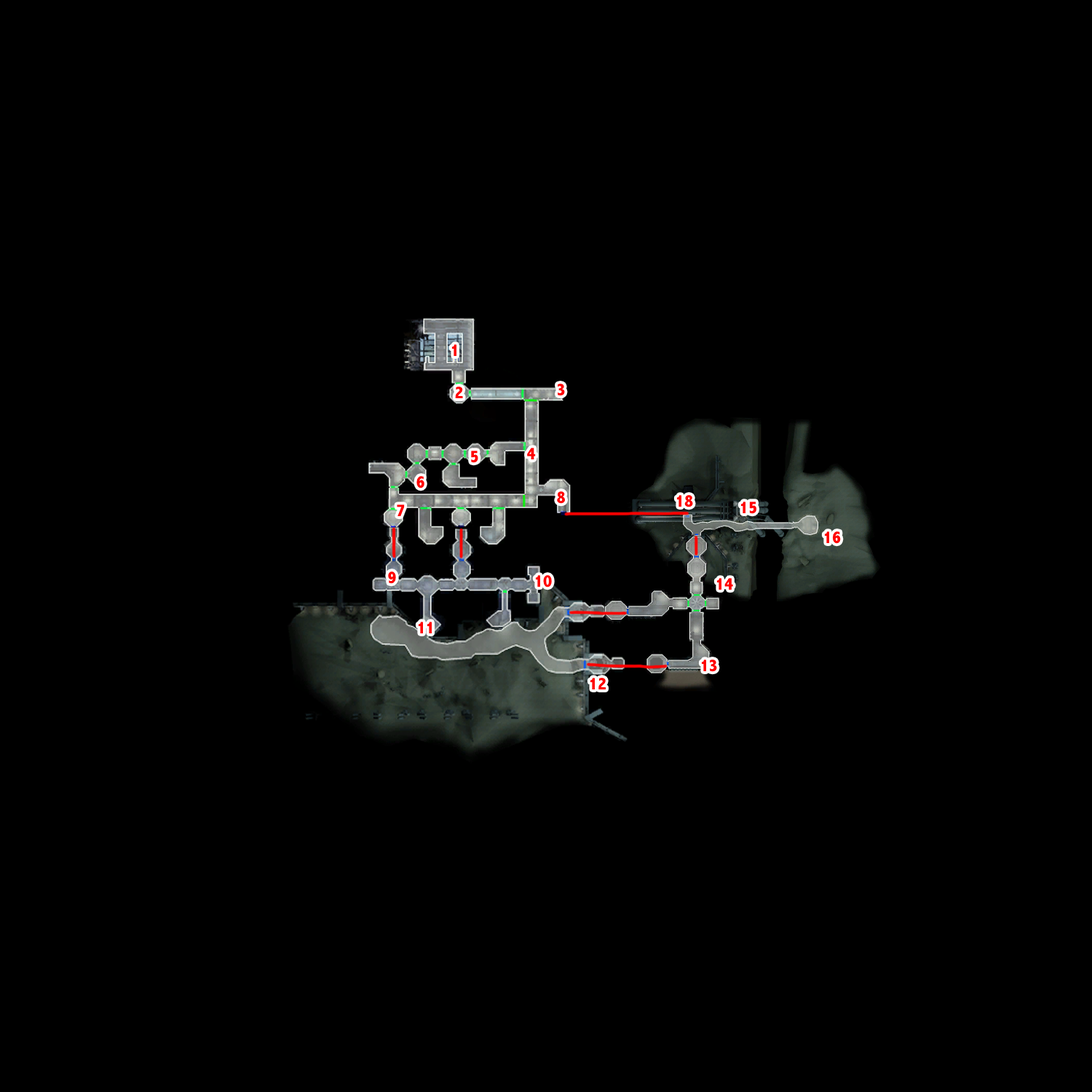
<style>
.page{position:relative;width:1092px;height:1092px;background:#000000}
.page>*{position:absolute;margin:0}
.t1{font:17.5px "AbadiMT-CondensedExtraBold";color:#ff0000}
</style>
<div class="page">
<p class="t1" style="left:451px;top:344px;width:5px;height:12px">1</p>
<p class="t1" style="left:455px;top:387px;width:8px;height:11px">2</p>
<p class="t1" style="left:558px;top:384px;width:7px;height:12px">3</p>
<p class="t1" style="left:527px;top:448px;width:9px;height:11px">4</p>
<p class="t1" style="left:471px;top:451px;width:7px;height:12px">5</p>
<p class="t1" style="left:416px;top:476px;width:8px;height:12px">6</p>
<p class="t1" style="left:557px;top:491px;width:8px;height:13px">8</p>
<p class="t1" style="left:676px;top:495px;width:17px;height:12px">18</p>
<p class="t1" style="left:397px;top:504px;width:8px;height:12px">7</p>
<p class="t1" style="left:740px;top:502px;width:16px;height:12px">15</p>
<p class="t1" style="left:824px;top:531px;width:17px;height:13px">16</p>
<p class="t1" style="left:388px;top:571px;width:8px;height:13px">9</p>
<p class="t1" style="left:535px;top:575px;width:17px;height:12px">10</p>
<p class="t1" style="left:716px;top:578px;width:17px;height:12px">14</p>
<p class="t1" style="left:418px;top:622px;width:14px;height:11px">11</p>
<p class="t1" style="left:701px;top:660px;width:16px;height:12px">13</p>
<p class="t1" style="left:590px;top:678px;width:16px;height:11px">12</p>
</div>
